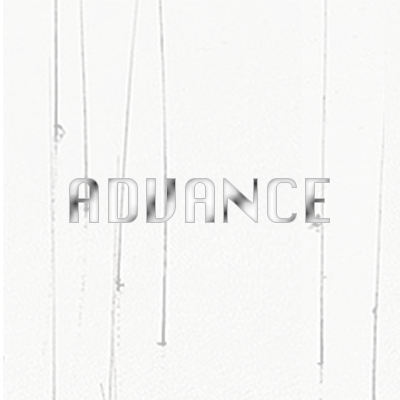
<style>
.page{position:relative;width:400px;height:400px}
.page>*{position:absolute;margin:0}
.t1{font:60px "Krungthep";letter-spacing:-0.025em}
</style>
<div class="page">
<p class="t1" style="left:69px;top:178px;width:261px;height:45px">ADVANCE</p>
</div>
